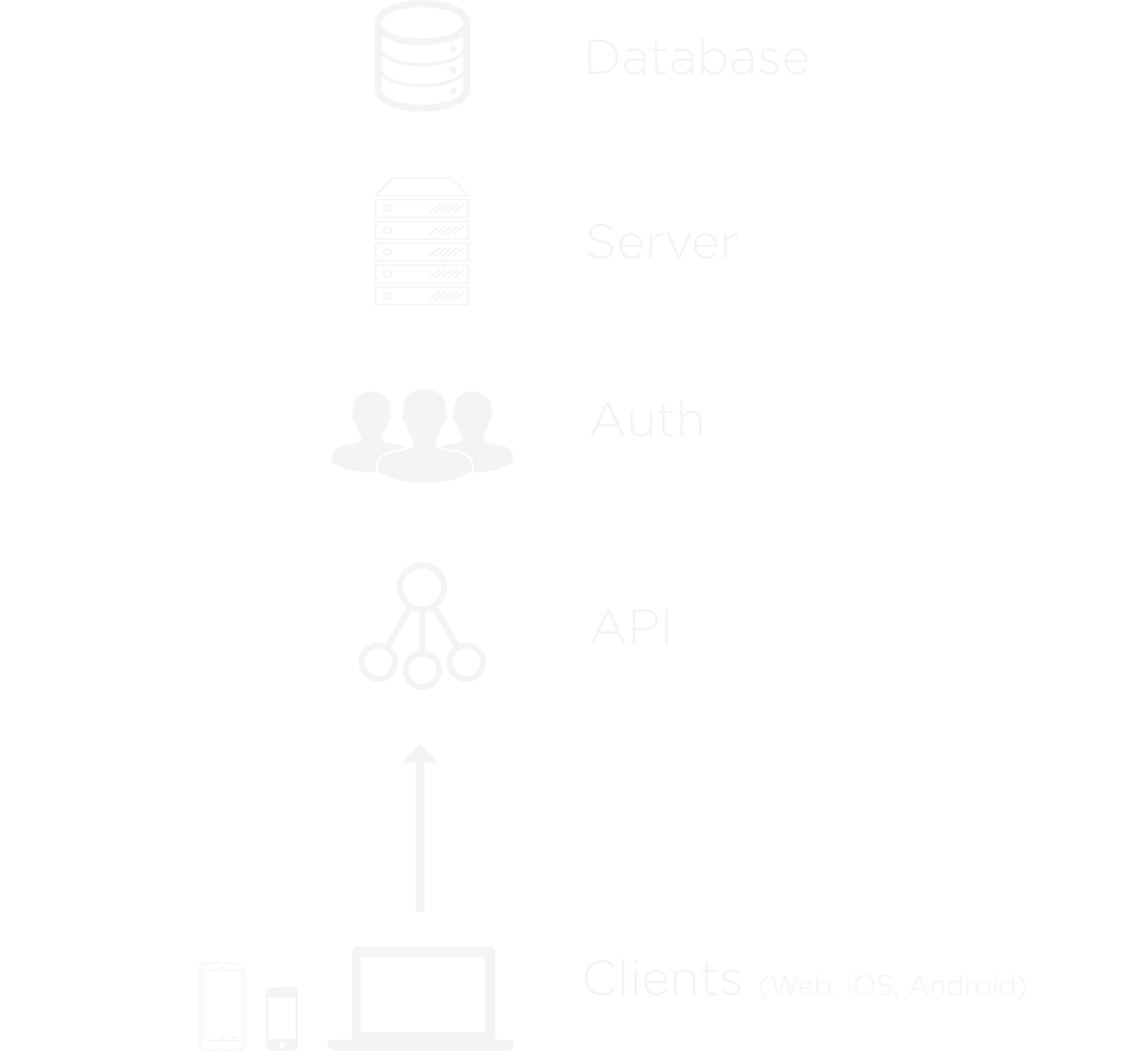
<style>
.page{position:relative;width:1135px;height:1051px;background:#ffffff}
.page>*{position:absolute;margin:0}
.t1{font:48.8px "Gotham-Light";color:#f4f4f4}
.t2{font:27.2px "Gotham-Light";color:#f4f4f4}
</style>
<div class="page">
<p class="t1" style="left:589px;top:38px;width:219px;height:36px">Database</p>
<p class="t1" style="left:588px;top:224px;width:150px;height:35px">Server</p>
<p class="t1" style="left:590px;top:400px;width:112px;height:36px">Auth</p>
<p class="t1" style="left:591px;top:609px;width:77px;height:34px">API</p>
<p class="t2" style="left:585px;top:959px;width:441px;height:39px"><span class="t1">Clients </span>(Web, iOS, Android)</p>
</div>
